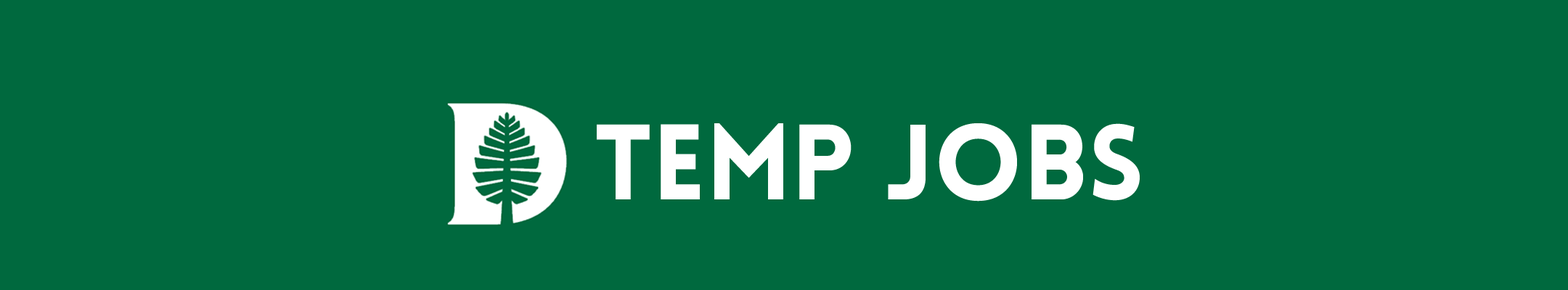
<style>
.page{position:relative;width:1568px;height:290px;background:#00693e}
.page>*{position:absolute;margin:0}
.t1{font:105px "LoveloBlack";color:#ffffff}
.t2{font:105px "LoveloBlack";color:#00693e}
</style>
<div class="page">
<p class="t1" style="left:597px;top:123px;width:543px;height:79px">Temp Jobs <span class="t2">Jobs</span></p>
</div>
